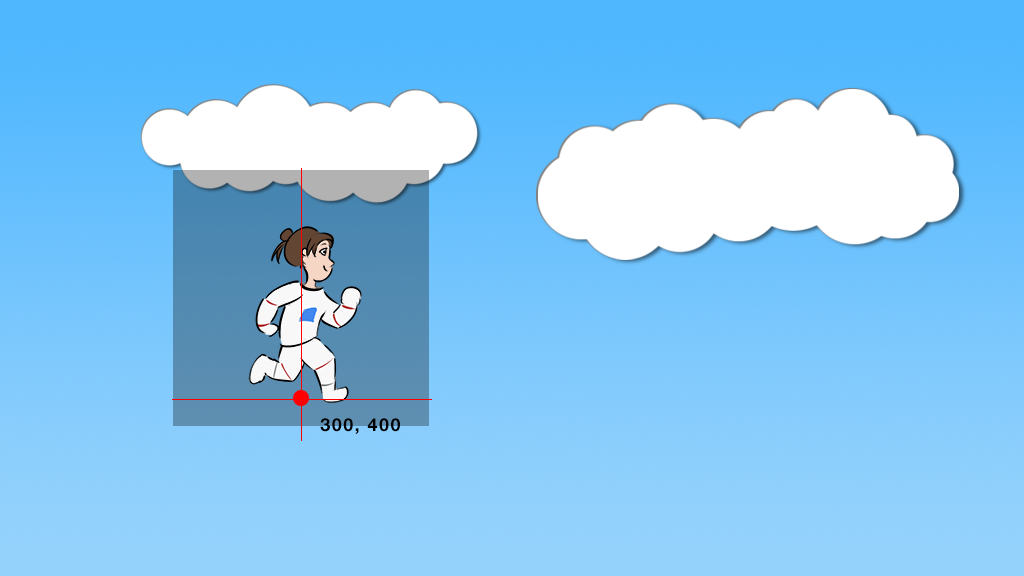
<style>
.page{position:relative;width:1024px;height:576px}
.page>*{position:absolute;margin:0}
.t1{font:18px "HelveticaNeue-Bold";letter-spacing:0.08em;color:#000000}
</style>
<div class="page">
<p class="t1" style="left:320px;top:418px;width:80px;height:16px">300, 400</p>
</div>
